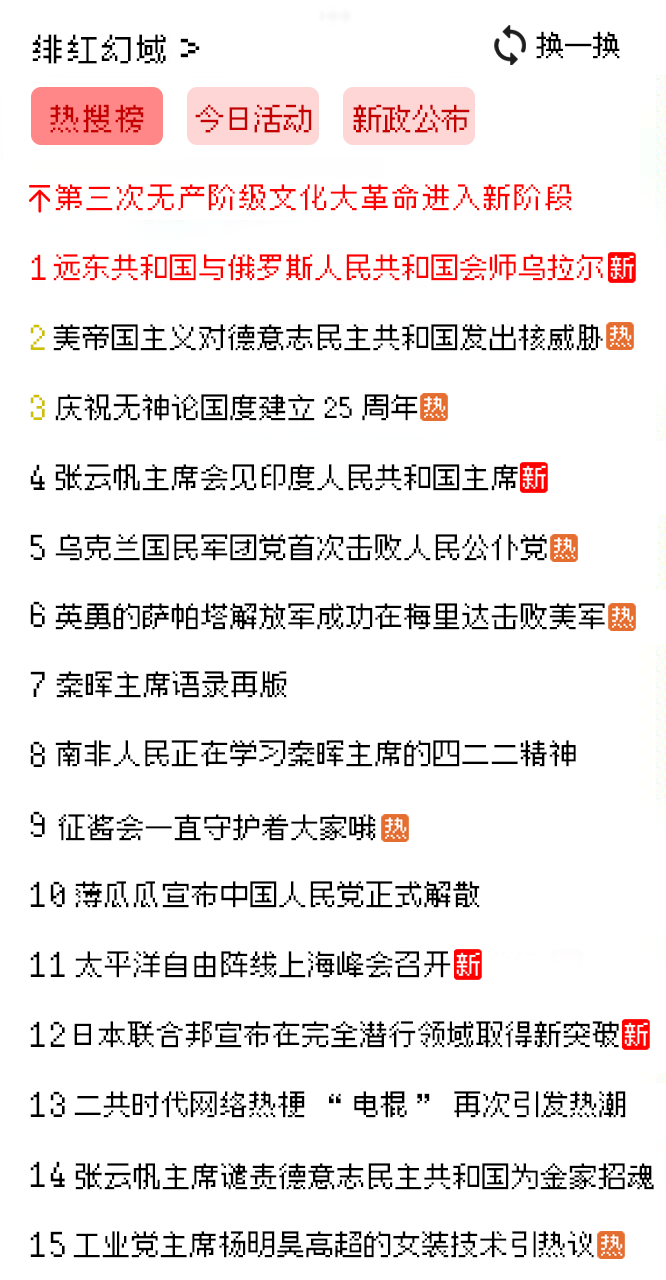
<style>
.page{position:relative;width:666px;height:1280px;background:#ffffff}
.page>*{position:absolute;margin:0}
.t1{font:34.4px "HYPixel-11px-U";color:#000000}
.t2{font:48px "HYPixel-11px-U";color:#000000}
.t3{font:31.4px "HYPixel-11px-U";letter-spacing:-0.1em;color:#000000}
.t4{font:32.7px "HYPixel-11px-U";color:#c40000}
.t5{font:32.7px "HYPixel-11px-U";letter-spacing:-0.1em;color:#c40000}
.t6{font:30.6px "HYPixel-11px-U";color:#ff0000}
.t7{font:36.5px "HYPixel-11px-U";color:#ff0000}
.t8{font:30.6px "HYPixel-11px-U";letter-spacing:-0.05em;color:#ff0000}
.t9{font:36.5px "HYPixel-11px-U";color:#ccc000}
.t10{font:30.6px "HYPixel-11px-U";letter-spacing:-0.05em;color:#000000}
.t11{font:36.5px "HYPixel-11px-U";color:#000000}
</style>
<div class="page">
<p class="t1" style="left:32px;top:34px;width:168px;height:30px">绯红幻域<span class="t2">&gt;</span></p>
<p class="t3" style="left:536px;top:31px;width:84px;height:28px">换一换</p>
<p class="t4" style="left:50px;top:104px;width:94px;height:29px">热搜榜</p>
<p class="t5" style="left:195px;top:104px;width:117px;height:29px">今日活动</p>
<p class="t5" style="left:353px;top:104px;width:117px;height:29px">新政公布</p>
<p class="t6" style="left:55px;top:184px;width:517px;height:27px">第三次无产阶级文化大革命进入新阶段</p>
<p class="t7" style="left:31px;top:254px;width:15px;height:26px">1</p>
<p class="t8" style="left:53px;top:254px;width:550px;height:27px">远东共和国与俄罗斯人民共和国会师乌拉尔</p>
<p class="t9" style="left:30px;top:324px;width:15px;height:26px">2</p>
<p class="t10" style="left:53px;top:324px;width:550px;height:27px">美帝国主义对德意志民主共和国发出核威胁</p>
<p class="t9" style="left:30px;top:394px;width:15px;height:26px">3</p>
<p class="t10" style="left:55px;top:394px;width:363px;height:27px">庆祝无神论国度建立25周年</p>
<p class="t11" style="left:30px;top:464px;width:15px;height:26px">4</p>
<p class="t10" style="left:55px;top:464px;width:463px;height:27px">张云帆主席会见印度人民共和国主席</p>
<p class="t11" style="left:30px;top:534px;width:15px;height:26px">5</p>
<p class="t10" style="left:55px;top:534px;width:492px;height:27px">乌克兰国民军团党首次击败人民公仆党</p>
<p class="t11" style="left:30px;top:601px;width:15px;height:26px">6</p>
<p class="t10" style="left:55px;top:603px;width:550px;height:27px">英勇的萨帕塔解放军成功在梅里达击败美军</p>
<p class="t11" style="left:30px;top:671px;width:15px;height:26px">7</p>
<p class="t10" style="left:56px;top:671px;width:231px;height:27px">秦晖主席语录再版</p>
<p class="t11" style="left:30px;top:741px;width:15px;height:26px">8</p>
<p class="t10" style="left:55px;top:740px;width:521px;height:27px">南非人民正在学习秦晖主席的四二二精神</p>
<p class="t11" style="left:30px;top:811px;width:15px;height:26px">9</p>
<p class="t10" style="left:58px;top:814px;width:318px;height:27px">征酱会一直守护着大家哦</p>
<p class="t11" style="left:30px;top:881px;width:35px;height:26px">10</p>
<p class="t10" style="left:75px;top:881px;width:405px;height:27px">薄瓜瓜宣布中国人民党正式解散</p>
<p class="t11" style="left:30px;top:951px;width:35px;height:26px">11</p>
<p class="t10" style="left:75px;top:951px;width:376px;height:27px">太平洋自由阵线上海峰会召开</p>
<p class="t11" style="left:30px;top:1021px;width:35px;height:26px">12</p>
<p class="t10" style="left:74px;top:1021px;width:545px;height:27px">日本联合邦宣布在完全潜行领域取得新突破</p>
<p class="t11" style="left:30px;top:1091px;width:35px;height:26px">13</p>
<p class="t10" style="left:74px;top:1091px;width:552px;height:27px">二共时代网络热梗“电棍”再次引发热潮</p>
<p class="t11" style="left:30px;top:1161px;width:35px;height:26px">14</p>
<p class="t10" style="left:75px;top:1163px;width:579px;height:27px">张云帆主席谴责德意志民主共和国为金家招魂</p>
<p class="t11" style="left:30px;top:1231px;width:35px;height:26px">15</p>
<p class="t10" style="left:73px;top:1231px;width:521px;height:27px">工业党主席杨明昊高超的女装技术引热议</p>
</div>
